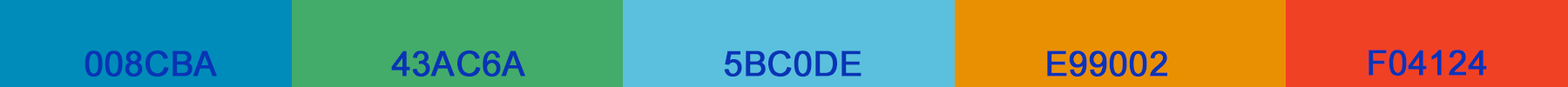
<style>
.page{position:relative;width:1568px;height:87px}
.page>*{position:absolute;margin:0}
.t1{font:34.6px "ArialMT";color:#0934b5;font-weight:bold}
</style>
<div class="page">
<p class="t1" style="left:84px;top:51px;width:133px;height:26px">008CBA</p>
<p class="t1" style="left:391px;top:51px;width:134px;height:26px">43AC6A</p>
<p class="t1" style="left:724px;top:51px;width:138px;height:26px">5BC0DE</p>
<p class="t1" style="left:1047px;top:51px;width:120px;height:26px">E99002</p>
<p class="t1" style="left:1369px;top:50px;width:118px;height:26px">F04124</p>
</div>
